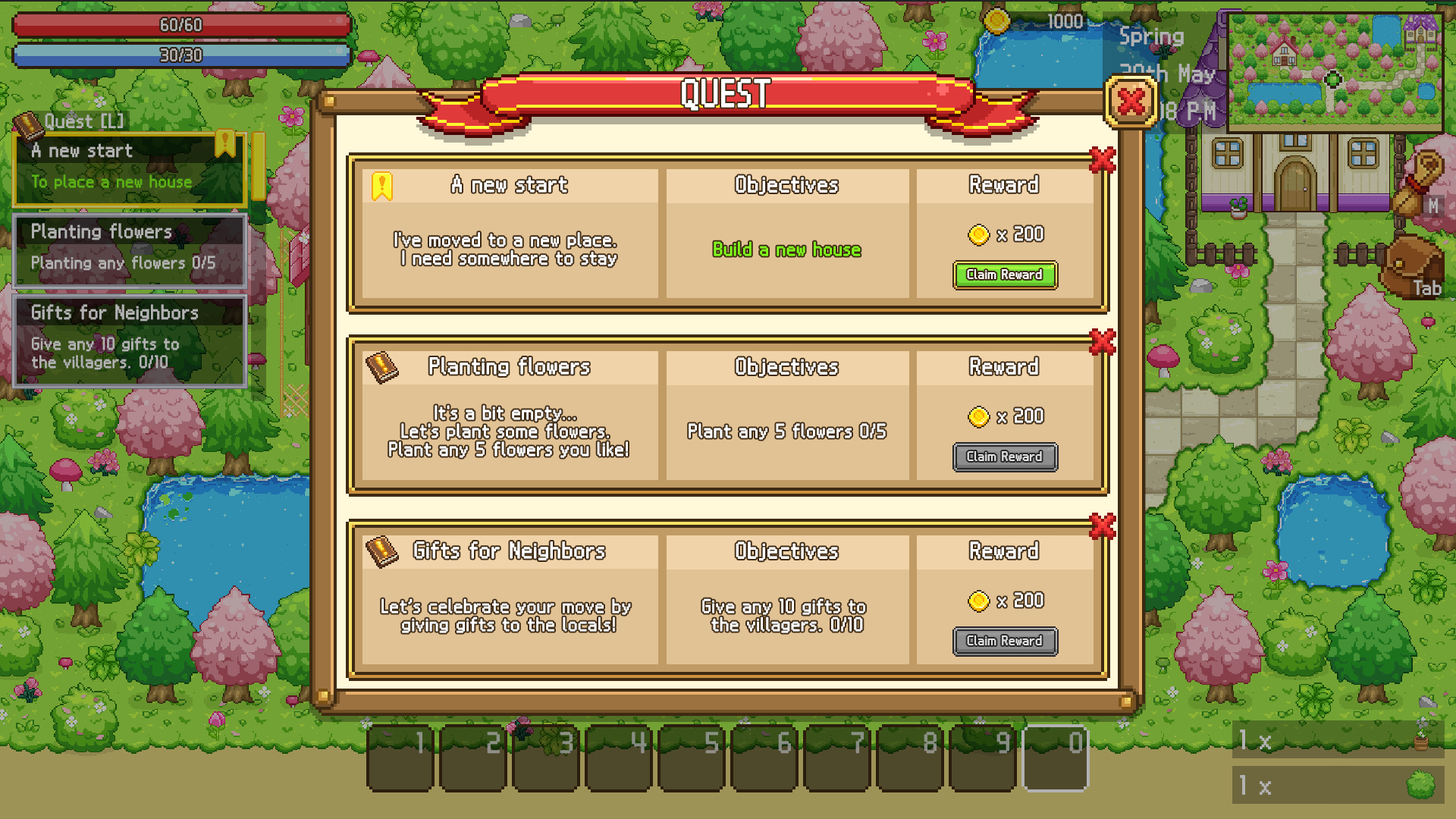
<style>
.page{position:relative;width:1456px;height:819px}
.page>*{position:absolute;margin:0}
.t1{font:30.3px "Galmuri9-Regular";letter-spacing:0.03em;color:#ffffff;text-transform:uppercase;font-weight:bold}
.t2{font:18.2px "Galmuri9-Regular";letter-spacing:0.03em;color:#ffffff;font-weight:bold}
.t3{font:15.2px "Galmuri9-Regular";letter-spacing:0.03em;color:#ffffff;font-weight:bold}
.t4{font:15.2px "Galmuri9-Regular";letter-spacing:0.03em;color:#82ff1d;font-weight:bold}
.t5{font:10.6px "Galmuri9-Regular";letter-spacing:0.03em;color:#ffffff;font-weight:bold}
.t6{font:10.6px "Galmuri9-Regular";letter-spacing:0.03em;color:#e1e1e1;font-weight:bold}
</style>
<div class="page">
<p class="t1" style="left:682px;top:79px;width:88px;height:32px">Quest</p>
<p class="t2" style="left:452px;top:175px;width:115px;height:18px">A new start</p>
<p class="t2" style="left:736px;top:175px;width:102px;height:20px">Objectives</p>
<p class="t2" style="left:970px;top:175px;width:68px;height:18px">Reward</p>
<p class="t3" style="left:394px;top:232px;width:223px;height:35px;text-align:center">I've moved to a new place. <br>I need somewhere to stay</p>
<p class="t3" style="left:998px;top:226px;width:45px;height:15px">x 200</p>
<p class="t4" style="left:714px;top:241px;width:147px;height:15px">Build a new house</p>
<p class="t5" style="left:967px;top:269px;width:75px;height:10px">Claim Reward</p>
<p class="t2" style="left:429px;top:357px;width:160px;height:19px">Planting flowers</p>
<p class="t2" style="left:736px;top:357px;width:102px;height:20px">Objectives</p>
<p class="t2" style="left:970px;top:357px;width:68px;height:18px">Reward</p>
<p class="t3" style="left:389px;top:405px;width:239px;height:53px;text-align:center">It's a bit empty... <br>Let's plant some flowers. <br>Plant any 5 flowers you like!</p>
<p class="t3" style="left:998px;top:408px;width:45px;height:15px">x 200</p>
<p class="t3" style="left:689px;top:423px;width:197px;height:17px">Plant any 5 flowers 0/5</p>
<p class="t6" style="left:967px;top:451px;width:75px;height:10px">Claim Reward</p>
<p class="t2" style="left:414px;top:541px;width:190px;height:19px">Gifts for Neighbors</p>
<p class="t2" style="left:736px;top:541px;width:102px;height:20px">Objectives</p>
<p class="t2" style="left:970px;top:541px;width:68px;height:18px">Reward</p>
<p class="t3" style="left:998px;top:592px;width:45px;height:15px">x 200</p>
<p class="t3" style="left:381px;top:598px;width:250px;height:35px;text-align:center">Let’s celebrate your move by <br>giving gifts to the locals!</p>
<p class="t3" style="left:702px;top:598px;width:163px;height:35px;text-align:center">Give any 10 gifts to <br>the villagers. 0/10</p>
<p class="t6" style="left:967px;top:635px;width:75px;height:10px">Claim Reward</p>
</div>
